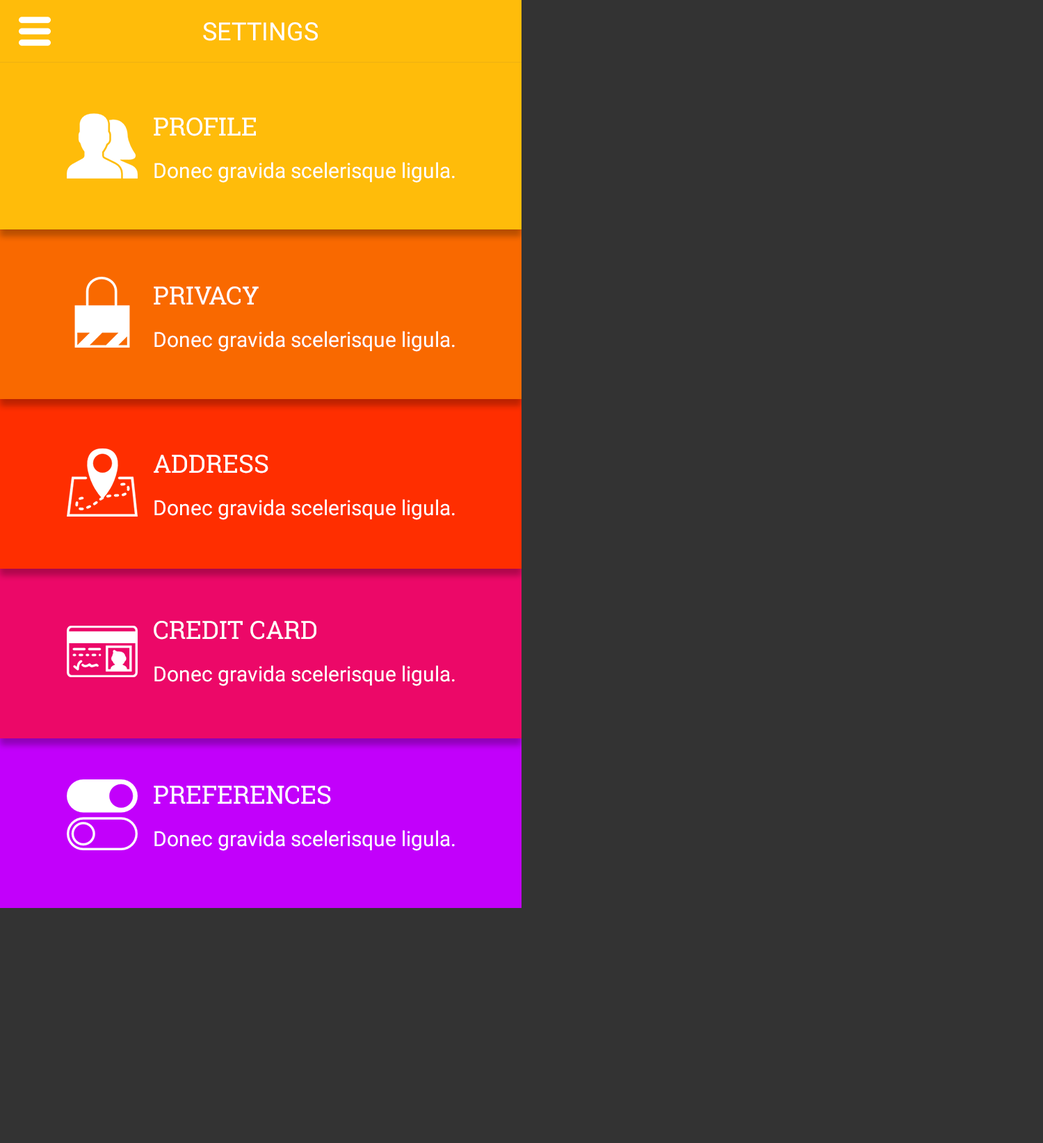
<style>
.page{position:relative;width:1043px;height:1143px;background:#333333}
.page>*{position:absolute;margin:0}
.t1{font:25px "Roboto-Regular";color:#ffffff}
.t2{font:25px "RobotoSlab-Regular";color:#ffffff}
.t3{font:20.9px "Roboto-Regular";color:#ffffff}
</style>
<div class="page">
<p class="t1" style="left:203px;top:22px;width:115px;height:19px">SETTINGS</p>
<p class="t2" style="left:154px;top:118px;width:102px;height:18px">PROFILE</p>
<p class="t3" style="left:154px;top:162px;width:301px;height:21px">Donec gravida scelerisque ligula.</p>
<p class="t2" style="left:154px;top:286px;width:105px;height:19px">PRIVACY</p>
<p class="t3" style="left:154px;top:331px;width:301px;height:21px">Donec gravida scelerisque ligula.</p>
<p class="t2" style="left:154px;top:455px;width:114px;height:19px">ADDRESS</p>
<p class="t3" style="left:154px;top:499px;width:301px;height:21px">Donec gravida scelerisque ligula.</p>
<p class="t2" style="left:154px;top:621px;width:162px;height:19px">CREDIT CARD</p>
<p class="t3" style="left:154px;top:665px;width:301px;height:21px">Donec gravida scelerisque ligula.</p>
<p class="t2" style="left:154px;top:786px;width:177px;height:19px">PREFERENCES</p>
<p class="t3" style="left:154px;top:830px;width:301px;height:21px">Donec gravida scelerisque ligula.</p>
</div>
